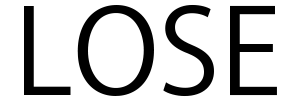
<style>
.page{position:relative;width:300px;height:100px;background:#ffffff}
.page>*{position:absolute;margin:0}
.t1{font:116.7px "KozGoPr6N-Regular";color:#000000}
</style>
<div class="page">
<p class="t1" style="left:24px;top:4px;width:253px;height:93px">LOSE</p>
</div>
